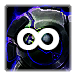
<style>
.page{position:relative;width:76px;height:76px;background:#ffffff}
.page>*{position:absolute;margin:0}
.t1{font:48px "Meiryo-Bold";color:#ffffff}
</style>
<div class="page">
<p class="t1" style="left:17px;top:28px;width:43px;height:22px">∞</p>
</div>
